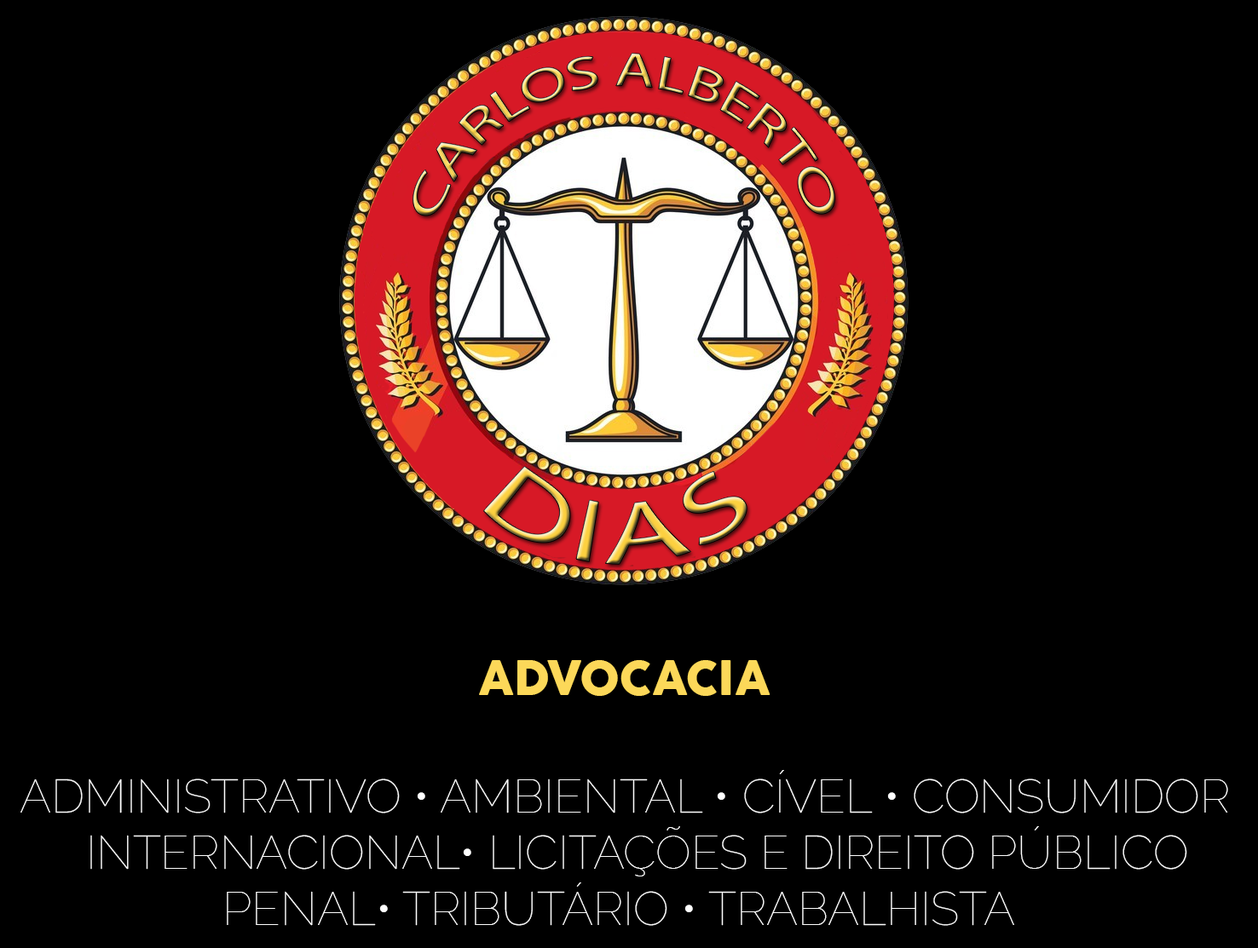
<style>
.page{position:relative;width:1258px;height:948px;background:#000000}
.page>*{position:absolute;margin:0}
.t1{font:89.5px "MyriadHebrew-Regular"}
.t2{font:46.8px "Cocogoose";color:#fcd859}
.t3{font:46.8px "Raleway-Thin";color:#ffffff}
</style>
<div class="page">
<p class="t1" style="left:483px;top:466px;width:264px;height:99px;rotate:1deg">DIAS</p>
<p class="t2" style="left:479px;top:660px;width:291px;height:36px">ADVOCACIA</p>
<p class="t3" style="left:20px;top:770px;width:1208px;height:156px;text-align:center">ADMINISTRATIVO • AMBIENTAL • CÍVEL • CONSUMIDOR <br>INTERNACIONAL• LICITAÇÕES E DIREITO PÚBLICO   <br>PENAL• TRIBUTÁRIO • TRABALHISTA</p>
</div>
